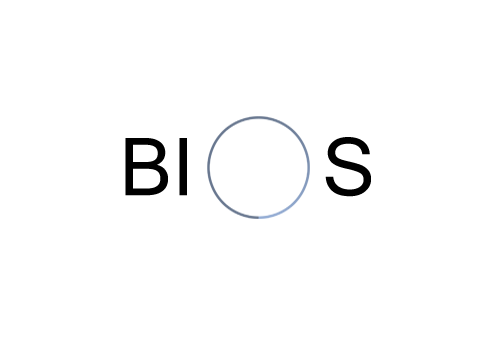
<style>
.page{position:relative;width:504px;height:360px;background:#ffffff}
.page>*{position:absolute;margin:0}
.t1{font:80px "MicrosoftSansSerif";color:#000000}
</style>
<div class="page">
<p class="t1" style="left:125px;top:137px;width:246px;height:60px">BI      S</p>
</div>
